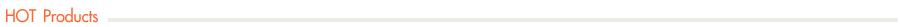
<style>
.page{position:relative;width:900px;height:27px;background:#ffffff}
.page>*{position:absolute;margin:0}
.t1{font:24px "PSLKittithadaADBold";color:#ff6633}
</style>
<div class="page">
<p class="t1" style="left:6px;top:7px;width:92px;height:16px">HOT Products</p>
</div>
